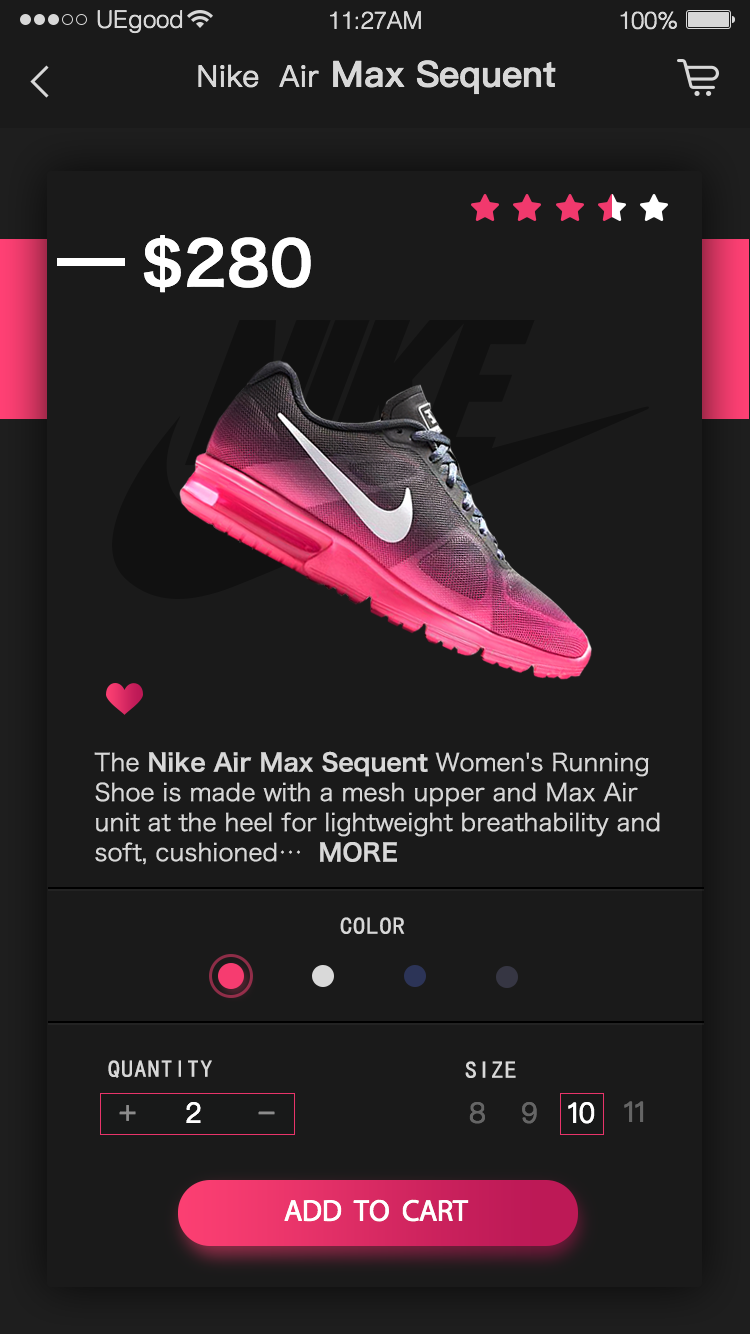
<style>
.page{position:relative;width:750px;height:1334px;background:#1a1a1a}
.page>*{position:absolute;margin:0}
.t1{font:24px "Helvetica-Light";color:#d8d8d8}
.t2{font:24px "Helvetica-Light";color:#d8d8d8;text-transform:uppercase}
.t3{font:36px "PingFangSC-Semibold";color:#d8d8d8}
.t4{font:30px "PingFangSC-Regular";color:#d8d8d8}
.t5{font:60px "HiraginoSansGB-W6";color:#ffffff}
.t6{font:24px/30px "HiraginoSansGB-W3";color:#d8d8d8}
.t7{font:24px/30px "HiraginoSansGB-W6";color:#d8d8d8}
.t8{font:24px "SimHei";letter-spacing:0.05em;color:#d8d8d8}
.t9{font:30px "PingFangSC-Regular";color:#8c8c8c}
.t10{font:28px "PingFangSC-Regular";color:#ffffff}
.t11{font:28px "PingFangSC-Regular";color:#656565}
.t12{font:30px "MyriadPro-Regular";color:#ffffff}
</style>
<div class="page">
<p class="t1" style="left:97px;top:10px;width:86px;height:24px"><span class="t2">UE</span>good</p>
<p class="t2" style="left:330px;top:11px;width:91px;height:18px">11:27am</p>
<p class="t2" style="left:620px;top:11px;width:57px;height:19px">100%</p>
<p class="t3" style="left:198px;top:60px;width:358px;height:35px"><span class="t4">Nike  Air  </span>Max Sequent</p>
<p class="t5" style="left:143px;top:235px;width:168px;height:58px">$280</p>
<p class="t6" style="left:94px;top:751px;width:566px;height:114px">The <span class="t7">Nike Air Max Sequent</span> Women's Running <br>Shoe is made with a mesh upper and Max Air <br>unit at the heel for lightweight breathability and <br>soft, cushioned…  <span class="t7">MORE</span></p>
<p class="t8" style="left:340px;top:917px;width:65px;height:17px">COLOR</p>
<p class="t8" style="left:108px;top:1060px;width:104px;height:18px">QUANTITY</p>
<p class="t8" style="left:465px;top:1061px;width:51px;height:17px">SIZE</p>
<p class="t9" style="left:119px;top:1105px;width:17px;height:16px">+</p>
<p class="t10" style="left:186px;top:1102px;width:15px;height:21px">2</p>
<p class="t11" style="left:469px;top:1102px;width:16px;height:22px">8</p>
<p class="t11" style="left:522px;top:1102px;width:15px;height:22px">9</p>
<p class="t10" style="left:568px;top:1102px;width:27px;height:22px">10</p>
<p class="t11" style="left:624px;top:1101px;width:20px;height:21px">11</p>
<p class="t9" style="left:258px;top:1111px;width:17px;height:4px">-</p>
<p class="t12" style="left:284px;top:1199px;width:185px;height:23px">ADD  TO  CART</p>
</div>
